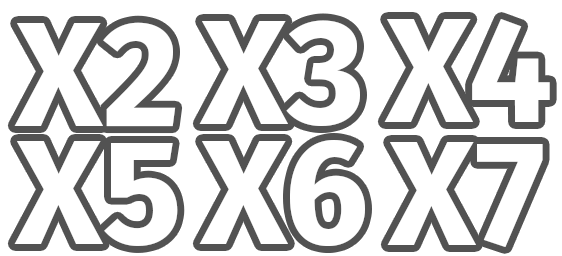
<style>
.page{position:relative;width:562px;height:256px;background:#ffffff}
.page>*{position:absolute;margin:0}
.t1{font:150px "FiraSans-Bold";color:#ffffff}
</style>
<div class="page">
<p class="t1" style="left:14px;top:22px;width:162px;height:105px">X2</p>
<p class="t1" style="left:199px;top:20px;width:161px;height:106px">X3</p>
<p class="t1" style="left:384px;top:19px;width:166px;height:103px">X4</p>
<p class="t1" style="left:14px;top:141px;width:164px;height:105px">X5</p>
<p class="t1" style="left:199px;top:140px;width:166px;height:106px">X6</p>
<p class="t1" style="left:387px;top:142px;width:156px;height:105px">X7</p>
</div>
